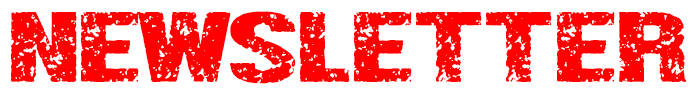
<style>
.page{position:relative;width:700px;height:100px;background:#ffffff}
.page>*{position:absolute;margin:0}
.t1{font:100px "FakeNews";color:#ff0000;text-transform:uppercase}
</style>
<div class="page">
<p class="t1" style="left:11px;top:11px;width:676px;height:73px">NewsLetter</p>
</div>
